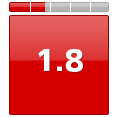
<style>
.page{position:relative;width:117px;height:117px;background:#d40000}
.page>*{position:absolute;margin:0}
.t1{font:36px "Colaborate-Bold";color:#ffffff;text-transform:uppercase}
</style>
<div class="page">
<p class="t1" style="left:38px;top:49px;width:45px;height:23px">1.8</p>
</div>
